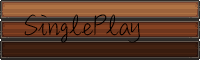
<style>
.page{position:relative;width:200px;height:60px}
.page>*{position:absolute;margin:0}
.t1{font:31px "MLingWaiMedium-SC";color:#000000}
</style>
<div class="page">
<p class="t1" style="left:24px;top:14px;width:116px;height:29px">SinglePlay</p>
</div>
